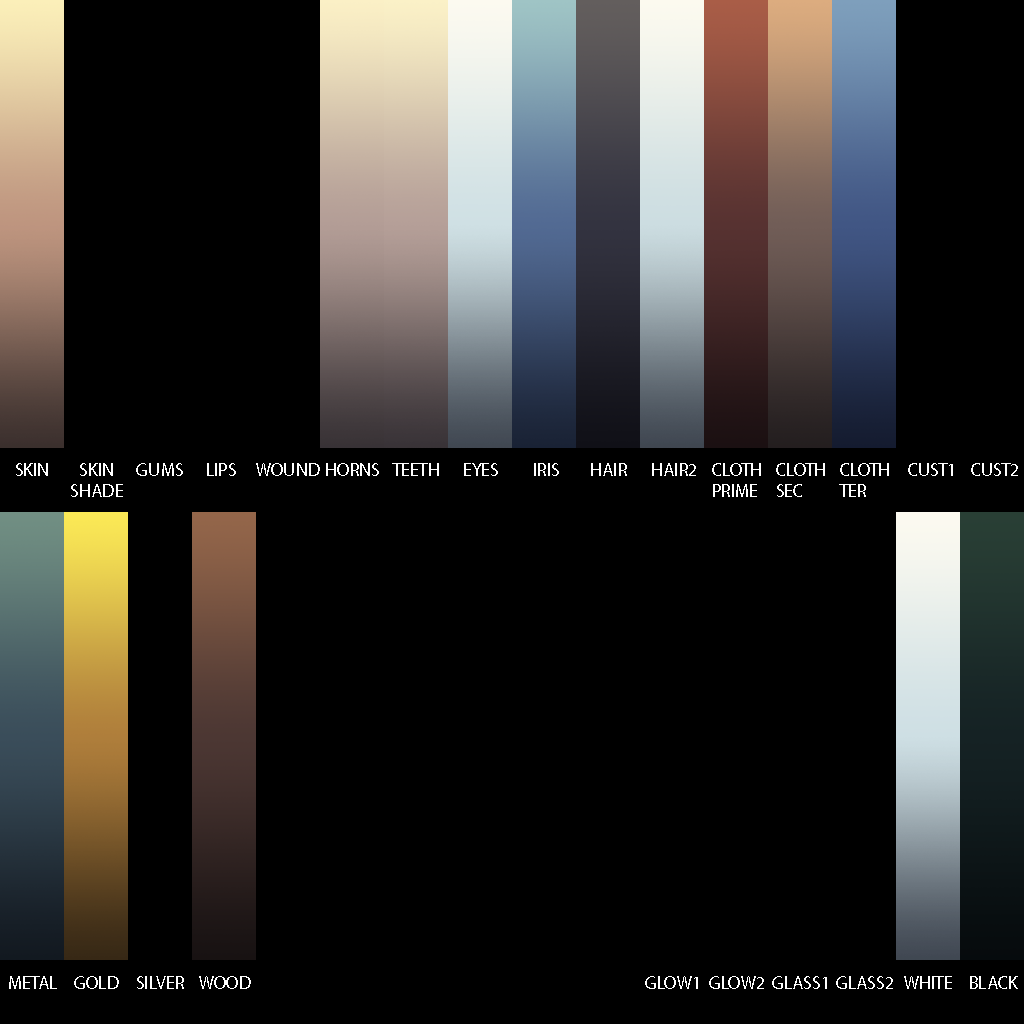
<style>
.page{position:relative;width:1024px;height:1024px;background:#000000}
.page>*{position:absolute;margin:0}
.t1{font:18px "MyriadPro-Regular";color:#ffffff}
</style>
<div class="page">
<p class="t1" style="left:16px;top:463px;width:32px;height:13px">SKIN</p>
<p class="t1" style="left:71px;top:463px;width:52px;height:34px;text-align:center">SKIN<br>SHADE</p>
<p class="t1" style="left:136px;top:463px;width:47px;height:13px">GUMS</p>
<p class="t1" style="left:207px;top:463px;width:29px;height:13px">LIPS</p>
<p class="t1" style="left:256px;top:463px;width:64px;height:13px">WOUND</p>
<p class="t1" style="left:326px;top:463px;width:53px;height:13px">HORNS</p>
<p class="t1" style="left:392px;top:463px;width:47px;height:13px">TEETH</p>
<p class="t1" style="left:464px;top:463px;width:34px;height:13px">EYES</p>
<p class="t1" style="left:534px;top:463px;width:25px;height:13px">IRIS</p>
<p class="t1" style="left:591px;top:463px;width:36px;height:13px">HAIR</p>
<p class="t1" style="left:652px;top:463px;width:44px;height:13px">HAIR2</p>
<p class="t1" style="left:712px;top:463px;width:49px;height:34px">CLOTH<br>PRIME</p>
<p class="t1" style="left:776px;top:463px;width:49px;height:34px">CLOTH<br>SEC</p>
<p class="t1" style="left:839px;top:463px;width:50px;height:34px">CLOTH<br>TER</p>
<p class="t1" style="left:908px;top:463px;width:45px;height:13px">CUST1</p>
<p class="t1" style="left:971px;top:463px;width:47px;height:13px">CUST2</p>
<p class="t1" style="left:9px;top:976px;width:48px;height:13px">METAL</p>
<p class="t1" style="left:74px;top:976px;width:45px;height:13px">GOLD</p>
<p class="t1" style="left:137px;top:976px;width:47px;height:13px">SILVER</p>
<p class="t1" style="left:199px;top:976px;width:52px;height:13px">WOOD</p>
<p class="t1" style="left:645px;top:976px;width:53px;height:13px">GLOW1</p>
<p class="t1" style="left:709px;top:976px;width:55px;height:13px">GLOW2</p>
<p class="t1" style="left:772px;top:976px;width:55px;height:13px">GLASS1</p>
<p class="t1" style="left:836px;top:976px;width:57px;height:13px">GLASS2</p>
<p class="t1" style="left:904px;top:976px;width:48px;height:13px">WHITE</p>
<p class="t1" style="left:970px;top:976px;width:48px;height:13px">BLACK</p>
</div>
